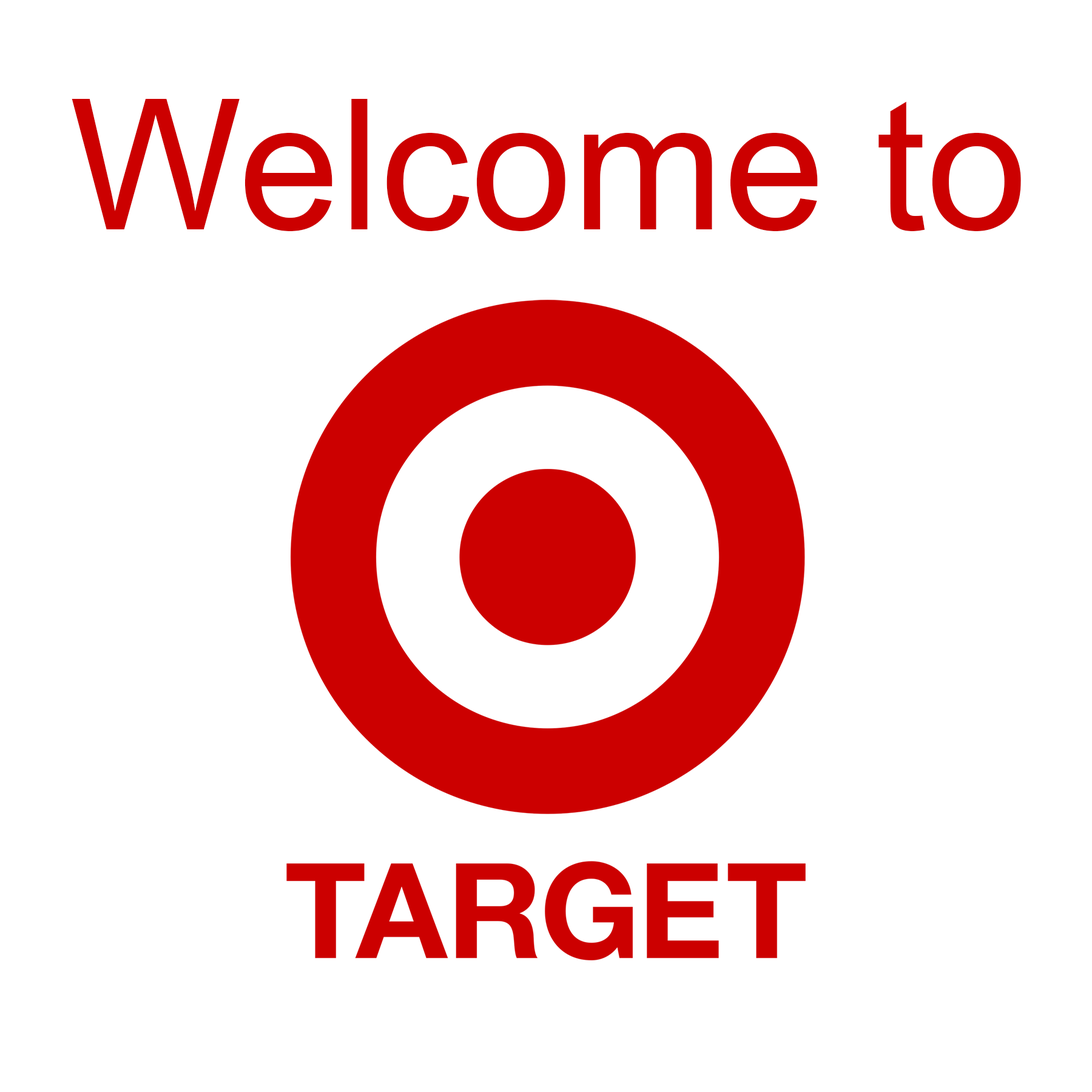
<style>
.page{position:relative;width:1092px;height:1092px;background:#ffffff}
.page>*{position:absolute;margin:0}
.t1{font:182px "ArialMT";color:#cc0000}
</style>
<div class="page">
<p class="t1" style="left:72px;top:99px;width:949px;height:132px">Welcome to</p>
</div>
